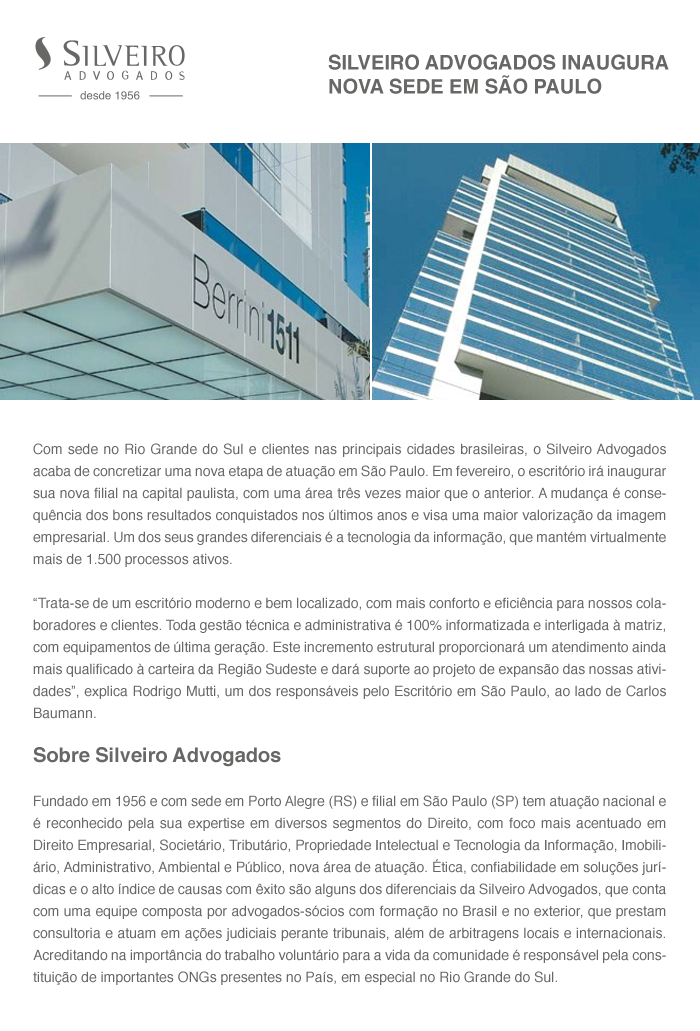
<style>
.page{position:relative;width:700px;height:1031px;background:#ffffff}
.page>*{position:absolute;margin:0}
.t1{font:20px "Helvetica-Bold";color:#676766}
.t2{font:14px/22px "Helvetica";color:#676766}
.t3{font:20px/22px "Helvetica-Bold";color:#676766}
</style>
<div class="page">
<p class="t1" style="left:328px;top:54px;width:341px;height:40px">SILVEIRO ADVOGADOS INAUGURA <br>NOVA SEDE EM SÃO PAULO</p>
<p class="t2" style="left:33px;top:443px;width:633px;height:542px;text-align:justify">Com sede no Rio Grande do Sul e clientes nas principais cidades brasileiras, o Silveiro Advogados acaba de concretizar uma nova etapa de atuação em São Paulo. Em fevereiro, o escritório irá inaugurar sua nova filial na capital paulista, com uma área três vezes maior que o anterior. A mudança é consequência dos bons resultados conquistados nos últimos anos e visa uma maior valorização da imagem empresarial. Um dos seus grandes diferenciais é a tecnologia da informação, que mantém virtualmente mais de 1.500 processos ativos. <br><br>“Trata-se de um escritório moderno e bem localizado, com mais conforto e eficiência para nossos colaboradores e clientes. Toda gestão técnica e administrativa é 100% informatizada e interligada à matriz, com equipamentos de última geração. Este incremento estrutural proporcionará um atendimento ainda mais qualificado à carteira da Região Sudeste e dará suporte ao projeto de expansão das nossas atividades”, explica Rodrigo Mutti, um dos responsáveis pelo Escritório em São Paulo, ao lado de Carlos Baumann.  <br><br><span class="t3">Sobre Silveiro Advogados<br><br></span>Fundado em 1956 e com sede em Porto Alegre (RS) e filial em São Paulo (SP) tem atuação nacional e é reconhecido pela sua expertise em diversos segmentos do Direito, com foco mais acentuado em Direito Empresarial, Societário, Tributário, Propriedade Intelectual e Tecnologia da Informação, Imobiliário, Administrativo, Ambiental e Público, nova área de atuação. Ética, confiabilidade em soluções jurídicas e o alto índice de causas com êxito são alguns dos diferenciais da Silveiro Advogados, que conta com uma equipe composta por advogados-sócios com formação no Brasil e no exterior, que prestam consultoria e atuam em ações judiciais perante tribunais, além de arbitragens locais e internacionais. Acreditando na importância do trabalho voluntário para a vida da comunidade é responsável pela constituição de importantes ONGs presentes no País, em especial no Rio Grande do Sul.</p>
</div>
